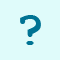
<style>
.page{position:relative;width:60px;height:60px;background:#dffbfa}
.page>*{position:absolute;margin:0}
.t1{font:50px "CourierNewPS-BoldMT";color:#007393}
</style>
<div class="page">
<p class="t1" style="left:20px;top:15px;width:21px;height:30px">?</p>
</div>
